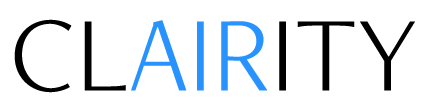
<style>
.page{position:relative;width:432px;height:108px;background:#ffffff}
.page>*{position:absolute;margin:0}
.t1{font:110px "FreightNeoProLight-Regular";color:#2893ff}
.t2{font:110px "FreightNeoProLight-Regular";color:#000000}
</style>
<div class="page">
<p class="t1" style="left:14px;top:19px;width:401px;height:74px"><span class="t2">CL</span>AIR<span class="t2">ITY</span></p>
</div>
